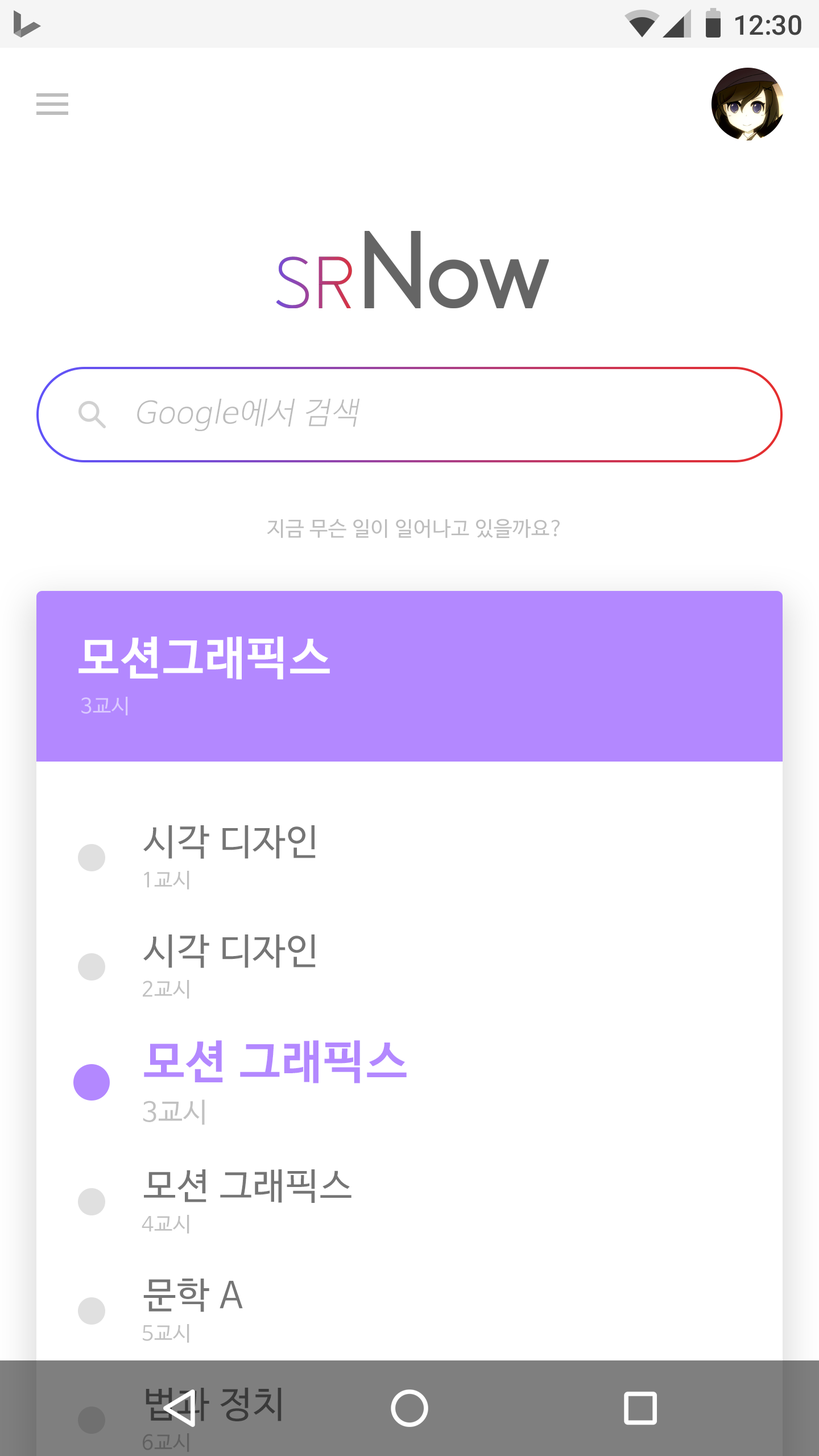
<style>
.page{position:relative;width:819px;height:1456px;background:#ffffff}
.page>*{position:absolute;margin:0}
.t1{font:27.3px "Roboto-Medium";color:#424242}
.t2{font:30.7px "NanumBarunGothicLight";letter-spacing:0.025em;color:#bdbdbd;font-style:italic}
.t3{font:20.5px "NanumBarunGothic";letter-spacing:0.025em;color:#bdbdbd}
.t4{font:46.1px "NanumBarunGothicBold";letter-spacing:0.025em;color:#ffffff}
.t5{font:20.5px "NanumBarunGothic";letter-spacing:0.025em;color:#dbc9ff}
.t6{font:36.4px "NanumBarunGothic";letter-spacing:0.025em;color:#757575}
.t7{font:20.5px "NanumBarunGothic";letter-spacing:0.025em;color:#c1c1c1}
.t8{font:46.1px "NanumBarunGothicBold";letter-spacing:0.025em;color:#b388ff}
.t9{font:27.3px "NanumBarunGothic";letter-spacing:0.025em;color:#c1c1c1}
.t10{font:36.4px "NanumBarunGothic";letter-spacing:0.025em;color:#3a3a3a}
.t11{font:20.5px "NanumBarunGothic";letter-spacing:0.025em;color:#757575}
</style>
<div class="page">
<p class="t1" style="left:735px;top:15px;width:66px;height:20px">12:30</p>
<p class="t2" style="left:137px;top:399px;width:223px;height:32px">Google에서 검색</p>
<p class="t3" style="left:267px;top:519px;width:293px;height:19px">지금 무슨 일이 일어나고 있을까요?</p>
<p class="t4" style="left:78px;top:636px;width:252px;height:44px">모션그래픽스</p>
<p class="t5" style="left:81px;top:697px;width:47px;height:18px">3교시</p>
<p class="t6" style="left:143px;top:825px;width:173px;height:34px">시각 디자인</p>
<p class="t7" style="left:144px;top:871px;width:45px;height:19px">1교시</p>
<p class="t6" style="left:143px;top:934px;width:173px;height:34px">시각 디자인</p>
<p class="t7" style="left:143px;top:980px;width:46px;height:19px">2교시</p>
<p class="t8" style="left:144px;top:1040px;width:263px;height:43px">모션 그래픽스</p>
<p class="t9" style="left:143px;top:1099px;width:62px;height:26px">3교시</p>
<p class="t6" style="left:144px;top:1169px;width:207px;height:34px">모션 그래픽스</p>
<p class="t7" style="left:142px;top:1215px;width:47px;height:19px">4교시</p>
<p class="t6" style="left:143px;top:1279px;width:100px;height:33px">문학 A</p>
<p class="t7" style="left:143px;top:1324px;width:46px;height:19px">5교시</p>
<p class="t10" style="left:146px;top:1387px;width:136px;height:34px">법과 정치</p>
<p class="t11" style="left:143px;top:1433px;width:46px;height:19px;opacity:0.5">6교시</p>
</div>
